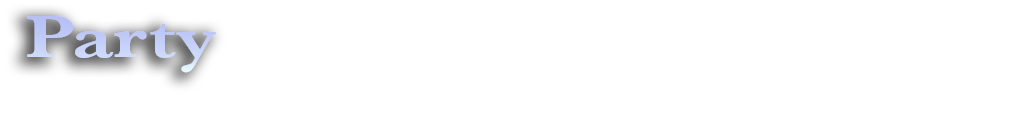
<style>
.page{position:relative;width:1024px;height:128px;background:#ffffff}
.page>*{position:absolute;margin:0}
.t1{font:61.9px "BaskervilleURW-Bol";letter-spacing:-0.005em;color:#c2cef8;scale:1.25 1}
</style>
<div class="page">
<p class="t1" style="left:27px;top:16px;width:189px;height:57px">Party</p>
</div>
